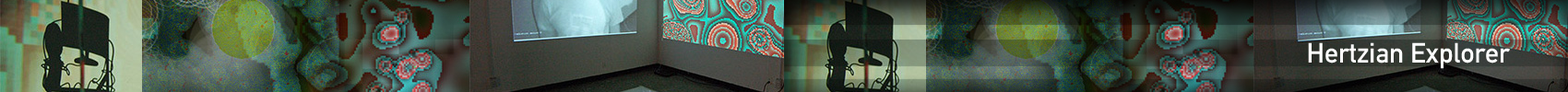
<style>
.page{position:relative;width:1568px;height:92px}
.page>*{position:absolute;margin:0}
.t1{font:27.7px "DIN-1451-Mittelschrift-Regular";color:#ffffff}
</style>
<div class="page">
<p class="t1" style="left:1308px;top:42px;width:203px;height:27px">Hertzian Explorer</p>
</div>
